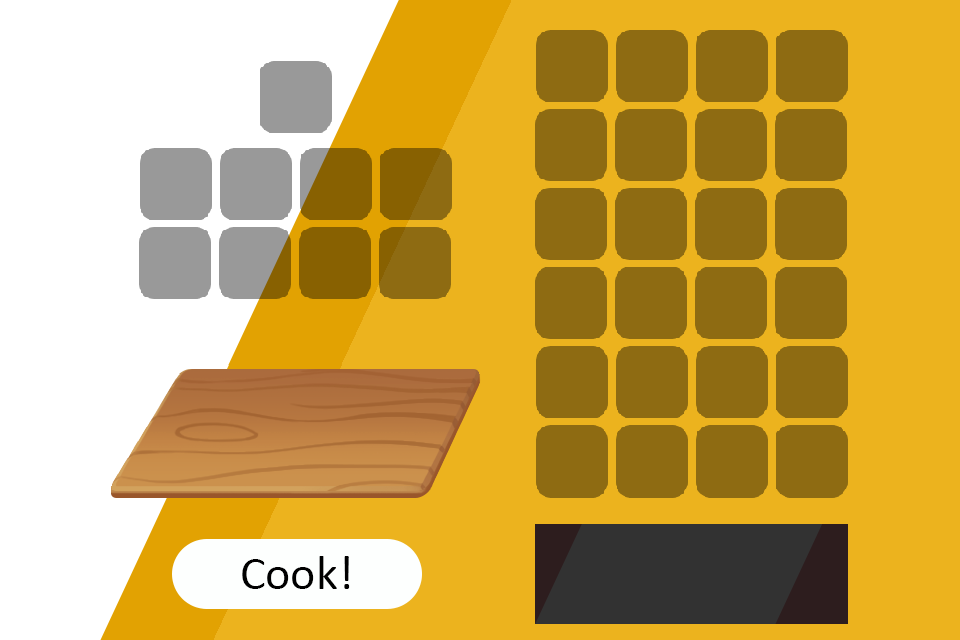
<style>
.page{position:relative;width:960px;height:640px;background:#ecb31e}
.page>*{position:absolute;margin:0}
.t1{font:48px "Calibri";color:#000000}
</style>
<div class="page">
<p class="t1" style="left:242px;top:556px;width:108px;height:33px">Cook!</p>
</div>
